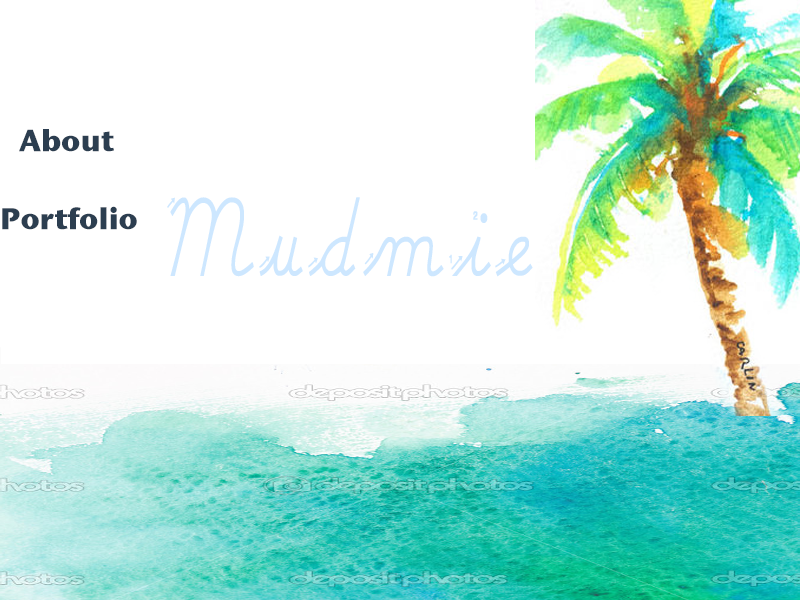
<style>
.page{position:relative;width:800px;height:600px;background:#ffffff}
.page>*{position:absolute;margin:0}
.t1{font:30px "StoneSansITC-Bold";color:#2c3e50}
.t2{font:122.3px "SchoolHouseCursiveB";color:#cde7ff;scale:0.7 1}
.t3{font:29.7px "StoneSansITC-Bold";color:#2c3e50}
</style>
<div class="page">
<p class="t1" style="left:19px;top:129px;width:95px;height:23px">About</p>
<p class="t2" style="left:167px;top:197px;width:366px;height:80px">Mudmie</p>
<p class="t3" style="left:2px;top:206px;width:135px;height:24px">Portfolio</p>
</div>
